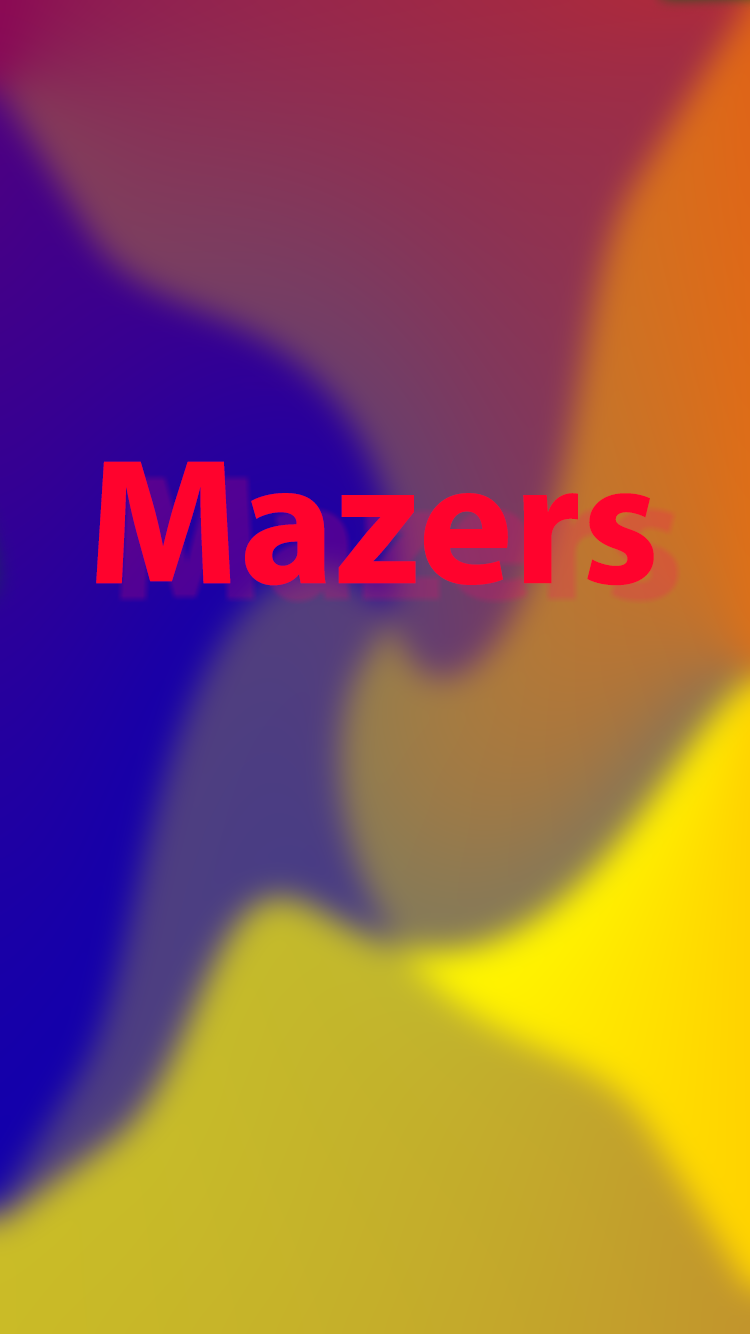
<style>
.page{position:relative;width:750px;height:1334px}
.page>*{position:absolute;margin:0}
.t1{font:180px "MyriadPro-Bold";color:#ff032d}
</style>
<div class="page">
<p class="t1" style="left:96px;top:461px;width:558px;height:125px">Mazers</p>
</div>
